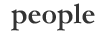
<style>
.page{position:relative;width:106px;height:34px;background:#ffffff}
.page>*{position:absolute;margin:0}
.t1{font:29.9px "Garamond-Bold";color:#333333}
</style>
<div class="page">
<p class="t1" style="left:11px;top:3px;width:84px;height:28px">people</p>
</div>
